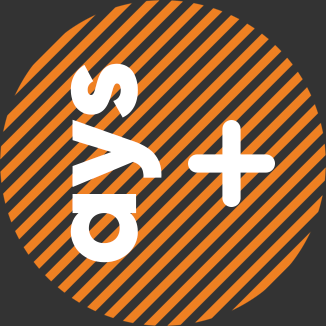
<style>
.page{position:relative;width:326px;height:326px;background:#333333}
.page>*{position:absolute;margin:0}
.t1{font:126.8px "Gilroy-ExtraBold";color:#ffffff}
</style>
<div class="page">
<p class="t1" style="left:70px;top:63px;width:92px;height:200px;rotate:-90deg">ays</p>
</div>
